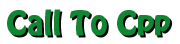
<style>
.page{position:relative;width:180px;height:44px;background:#ffffff}
.page>*{position:absolute;margin:0}
.t1{font:30px "HoboStd";color:#118632;font-weight:bold}
.t2{font:30px "HoboStd";font-weight:bold}
</style>
<div class="page">
<p class="t1" style="left:7px;top:9px;width:163px;height:27px">Call To Cpp</p>
<p class="t2" style="left:9px;top:11px;width:163px;height:27px">Call To Cpp</p>
</div>
